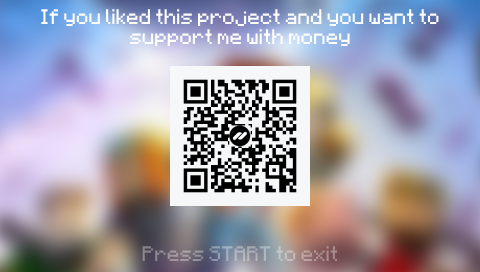
<style>
.page{position:relative;width:480px;height:272px}
.page>*{position:absolute;margin:0}
.t1{font:16.7px "Minecraft";color:#ffffff}
.t2{font:16.7px "Minecraft"}
</style>
<div class="page">
<p class="t1" style="left:41px;top:9px;width:398px;height:37px;text-align:center">If you liked this project and you want to support me with money</p>
<p class="t2" style="left:142px;top:246px;width:196px;height:16px">Press START to exit</p>
</div>
